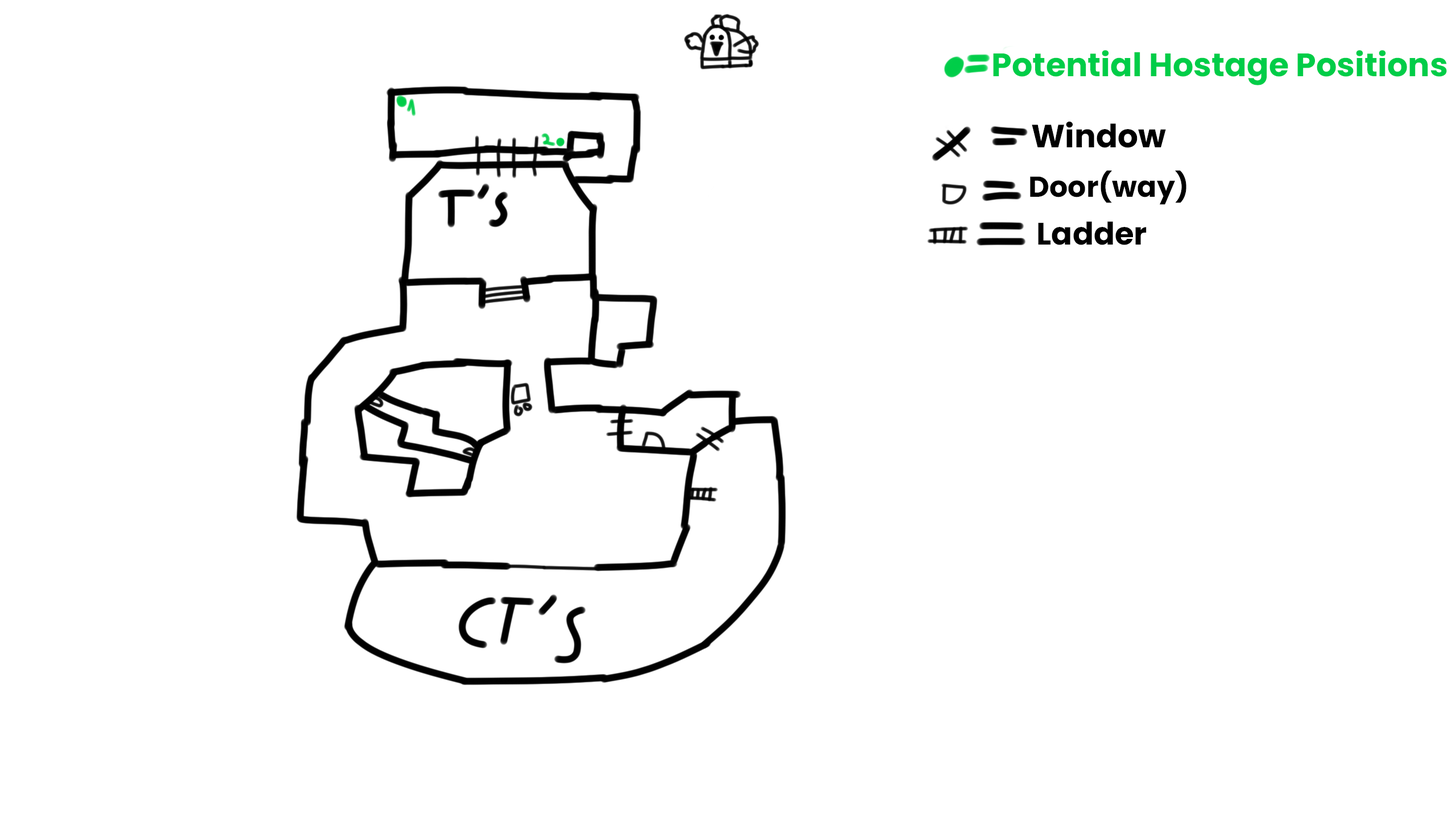
<style>
.page{position:relative;width:1456px;height:819px;background:#ffffff}
.page>*{position:absolute;margin:0}
.t1{font:32.5px "Poppins-Bold";color:#00cd48}
.t2{font:32.1px "Poppins-Bold";color:#000000}
.t3{font:28.9px "Poppins-Bold";color:#000000}
.t4{font:31.1px "Poppins-Bold";color:#000000}
</style>
<div class="page">
<p class="t1" style="left:993px;top:50px;width:454px;height:35px">Potential Hostage Positions</p>
<p class="t2" style="left:1032px;top:121px;width:134px;height:27px">Window</p>
<p class="t3" style="left:1030px;top:170px;width:156px;height:35px">Door(way)</p>
<p class="t4" style="left:1038px;top:221px;width:109px;height:24px">Ladder</p>
</div>
